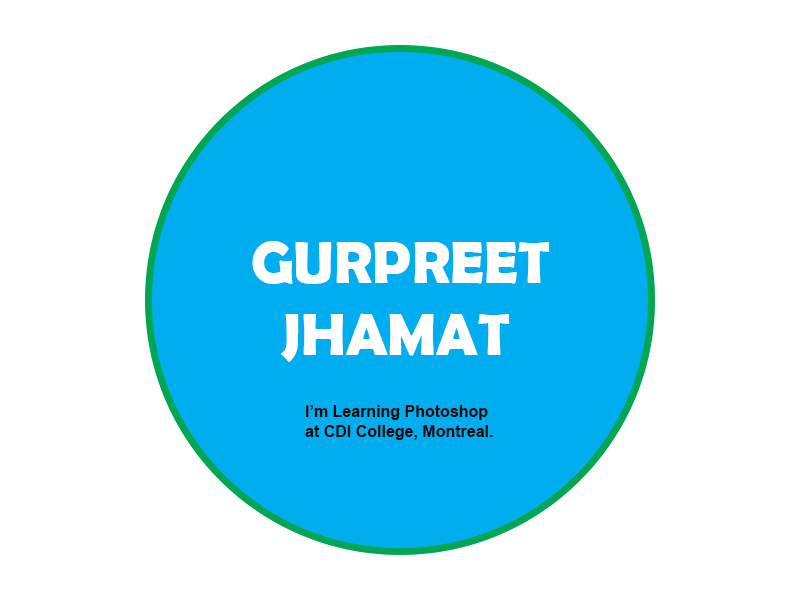
<style>
.page{position:relative;width:800px;height:600px;background:#ffffff}
.page>*{position:absolute;margin:0}
.t1{font:60px "BerlinSansFBDemi-Bold";color:#ffffff}
.t2{font:16px/20px "Arial-BoldMT";color:#080808}
</style>
<div class="page">
<p class="t1" style="left:252px;top:241px;width:298px;height:121px">GURPREET<br>  JHAMAT</p>
<p class="t2" style="left:305px;top:405px;width:188px;height:35px">I’m Learning Photoshop<br>at CDI College, Montreal.</p>
</div>
